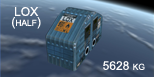
<style>
.page{position:relative;width:154px;height:77px}
.page>*{position:absolute;margin:0}
.t1{font:12px/10px "ArialMT";color:#fcfcfc;font-variant:small-caps}
.t2{font:12px "ArialMT";color:#fcfcfc;font-variant:small-caps}
</style>
<div class="page">
<p class="t1" style="left:12px;top:7px;width:29px;height:22px;text-align:center">LOX<br>(half)</p>
<p class="t2" style="left:103px;top:61px;width:42px;height:9px">5628 kg</p>
</div>
